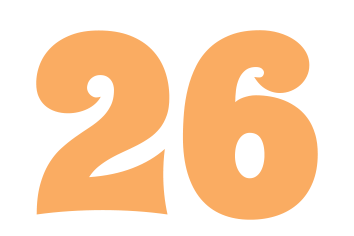
<style>
.page{position:relative;width:354px;height:236px;background:#ffffff}
.page>*{position:absolute;margin:0}
.t1{font:250px "SpicyRice-Regular";color:#faac62}
</style>
<div class="page">
<p class="t1" style="left:36px;top:30px;width:282px;height:190px">26</p>
</div>
